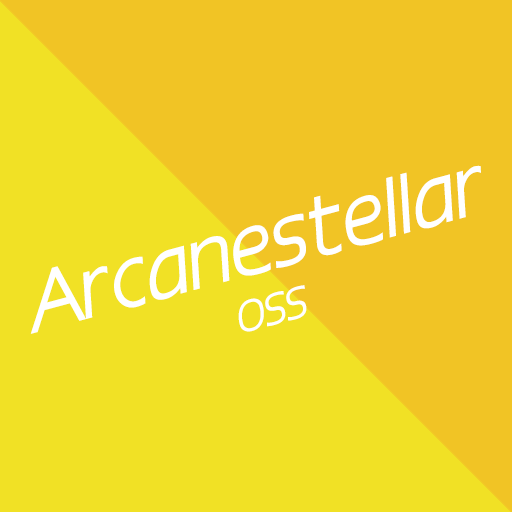
<style>
.page{position:relative;width:512px;height:512px;background:#f1c425}
.page>*{position:absolute;margin:0}
.t1{font:77.4px "386-CAI978";color:#ffffff}
.t2{font:39.4px "386-CAI978";color:#ffffff}
</style>
<div class="page">
<p class="t1" style="left:30px;top:165px;width:451px;height:169px;rotate:-15deg">Arcanestellar</p>
<p class="t2" style="left:238px;top:285px;width:69px;height:47px;rotate:-15deg">OSS</p>
</div>
